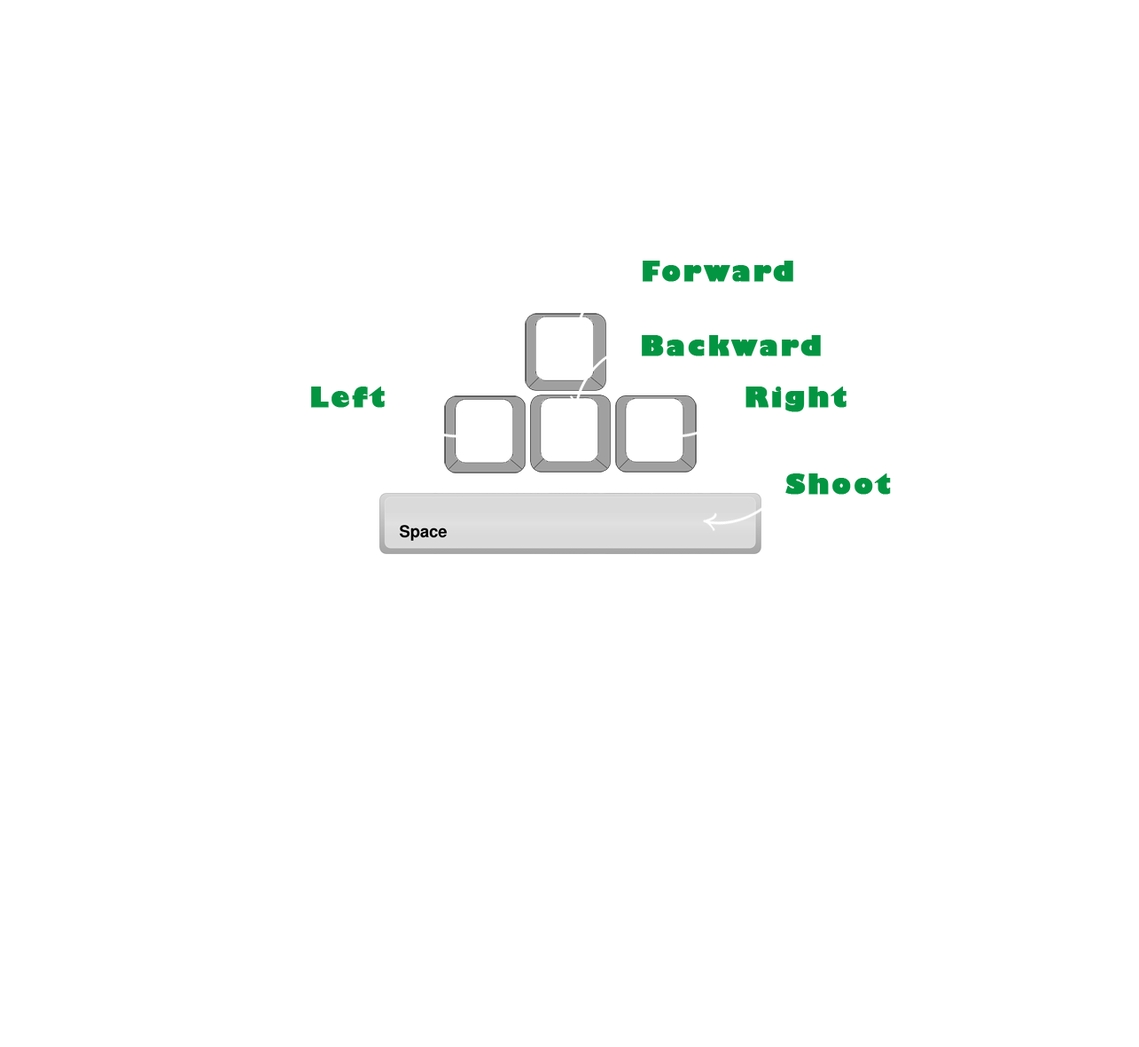
<style>
.page{position:relative;width:1139px;height:1047px;background:#ffffff}
.page>*{position:absolute;margin:0}
.t1{font:26.6px "GillSans-UltraBold";letter-spacing:0.075em;color:#049542;font-weight:bold}
</style>
<div class="page">
<p class="t1" style="left:643px;top:261px;width:150px;height:21px">Forward</p>
<p class="t1" style="left:642px;top:335px;width:179px;height:21px">Backward</p>
<p class="t1" style="left:311px;top:386px;width:74px;height:22px">Left</p>
<p class="t1" style="left:745px;top:386px;width:102px;height:26px">Right</p>
<p class="t1" style="left:785px;top:473px;width:106px;height:22px">Shoot</p>
</div>
